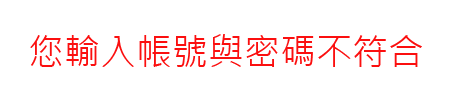
<style>
.page{position:relative;width:454px;height:96px;background:#ffffff}
.page>*{position:absolute;margin:0}
.t1{font:36px "MicrosoftJhengHeiRegular";color:#fb0f0f}
</style>
<div class="page">
<p class="t1" style="left:30px;top:34px;width:392px;height:33px">您輸入帳號與密碼不符合</p>
</div>
